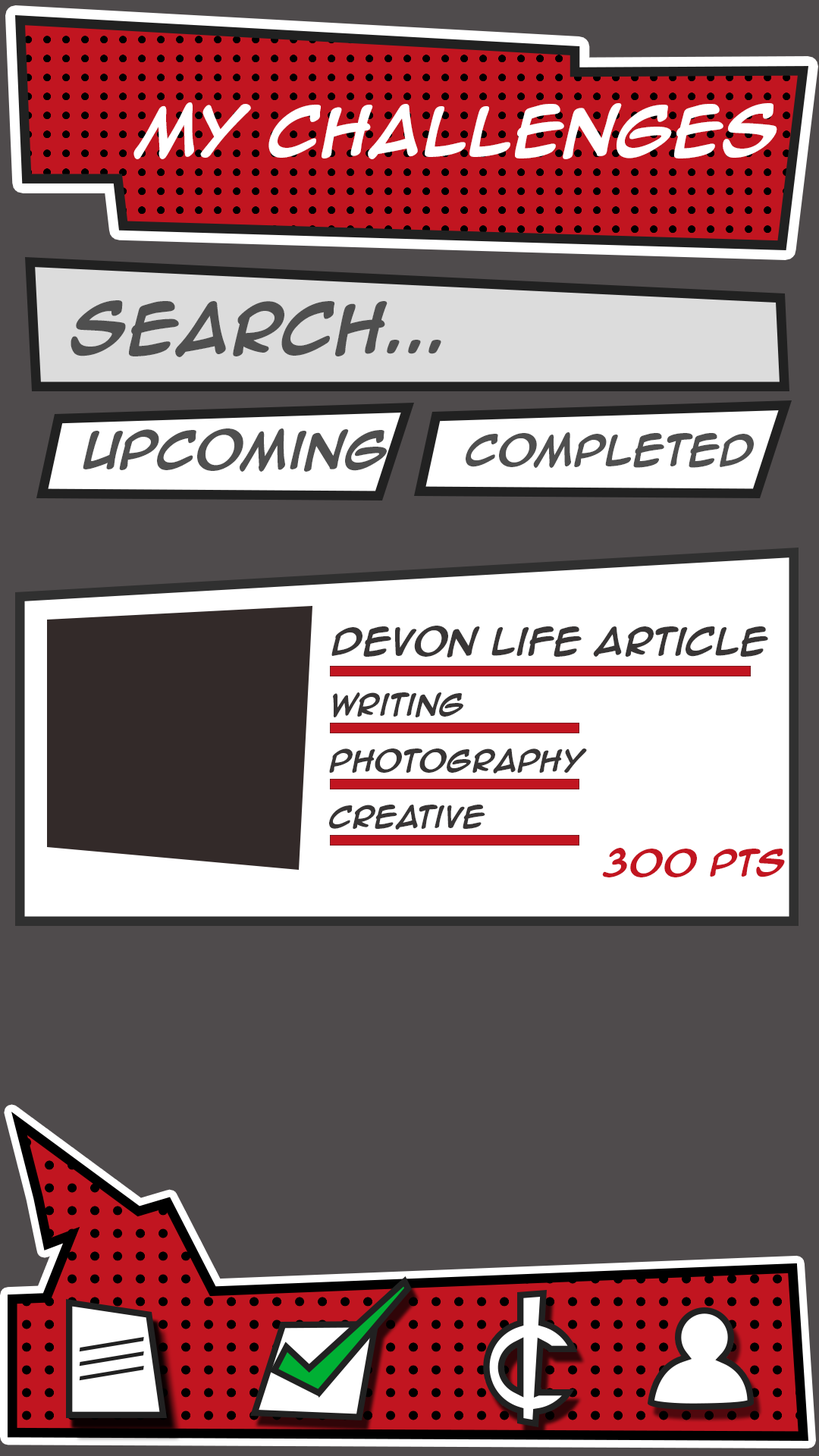
<style>
.page{position:relative;width:819px;height:1456px;background:#4f4b4c}
.page>*{position:absolute;margin:0}
.t1{font:57.1px "AnimeAce2.0BB-Bold";color:#ffffff}
.t2{font:58.4px "AnimeAce2.0BB-Bold";color:#4f4f4f}
.t3{font:43.4px "AnimeAce2.0BB-Bold";color:#4f4f4f}
.t4{font:35.7px "AnimeAce2.0BB-Bold";color:#4f4f4f}
.t5{font:31.6px "AnimeAce2.0BB-Bold";color:#383535}
.t6{font:25.3px "AnimeAce2.0BB-Bold";color:#383535}
.t7{font:29.8px "AnimeAce2.0BB-Bold";color:#c11520}
</style>
<div class="page">
<p class="t1" style="left:133px;top:102px;width:644px;height:57px">My CHallenges</p>
<p class="t2" style="left:71px;top:300px;width:370px;height:57px">Search...</p>
<p class="t3" style="left:83px;top:428px;width:304px;height:44px">Upcoming</p>
<p class="t4" style="left:466px;top:432px;width:288px;height:36px">Completed</p>
<p class="t5" style="left:331px;top:626px;width:437px;height:31px">Devon Life Article</p>
<p class="t6" style="left:333px;top:692px;width:130px;height:25px">Writing</p>
<p class="t6" style="left:329px;top:748px;width:258px;height:25px">PHotography</p>
<p class="t6" style="left:329px;top:805px;width:156px;height:25px">Creative</p>
<p class="t7" style="left:602px;top:848px;width:183px;height:29px">300 pts</p>
</div>
